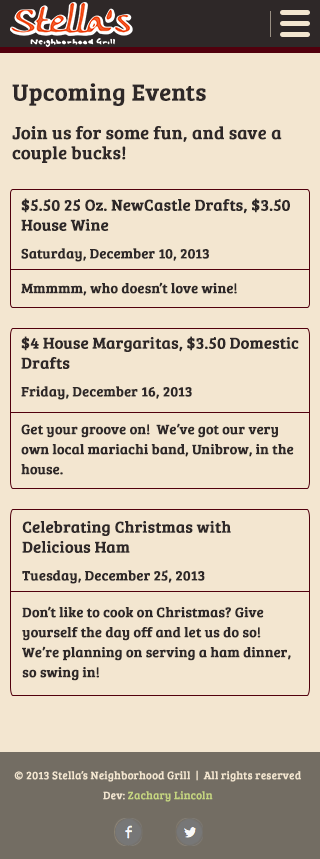
<style>
.page{position:relative;width:320px;height:859px;background:#f3e6d0}
.page>*{position:absolute;margin:0}
.t1{font:24px "BreeSerif-Regular";color:#2e2828;font-weight:bold}
.t2{font:18px/20px "BreeSerif-Regular";color:#2e2828;font-weight:bold}
.t3{font:16px/20px "BreeSerif-Regular";color:#2e2828;font-weight:bold}
.t4{font:14px "BreeSerif-Regular";color:#2e2828;font-weight:bold}
.t5{font:14px/20px "BreeSerif-Regular";color:#2e2828;font-weight:bold}
.t6{font:11px/20px "BreeSerif-Regular";color:#f3e6d0;font-weight:bold}
.t7{font:11px/20px "BreeSerif-Regular";color:#c5d580;font-weight:bold}
</style>
<div class="page">
<p class="t1" style="left:12px;top:83px;width:194px;height:23px">Upcoming Events</p>
<p class="t2" style="left:12px;top:126px;width:270px;height:37px">Join us for some fun, and save a<br>couple bucks!</p>
<p class="t3" style="left:21px;top:198px;width:269px;height:33px">$5.50 25 Oz. NewCastle Drafts, $3.50<br>House Wine</p>
<p class="t4" style="left:21px;top:248px;width:188px;height:14px">Saturday, December 10, 2013</p>
<p class="t4" style="left:21px;top:282px;width:216px;height:14px">Mmmmm, who doesn’t love wine!</p>
<p class="t3" style="left:21px;top:336px;width:278px;height:33px">$4 House Margaritas, $3.50 Domestic<br>Drafts</p>
<p class="t4" style="left:21px;top:386px;width:171px;height:14px">Friday, December 16, 2013</p>
<p class="t5" style="left:21px;top:423px;width:273px;height:52px">Get your groove on!  We’ve got our very<br>own local mariachi band, Unibrow, in the<br>house.</p>
<p class="t3" style="left:22px;top:521px;width:209px;height:32px">Celebrating Christmas with<br>Delicious Ham</p>
<p class="t4" style="left:22px;top:570px;width:183px;height:14px">Tuesday, December 25, 2013</p>
<p class="t5" style="left:22px;top:606px;width:269px;height:75px">Don’t like to cook on Christmas? Give<br>yourself the day off and let us do so! <br>We’re planning on serving a ham dinner,<br>so swing in!</p>
<p class="t6" style="left:14px;top:770px;width:287px;height:32px;text-align:center">© 2013 Stella’s Neighborhood Grill  |  All rights reserved<br>Dev: <span class="t7">Zachary Lincoln</span></p>
</div>
